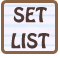
<style>
.page{position:relative;width:60px;height:58px}
.page>*{position:absolute;margin:0}
.t1{font:18px "HoboStd";color:#4e3831}
</style>
<div class="page">
<p class="t1" style="left:13px;top:7px;width:34px;height:16px">SET</p>
<p class="t1" style="left:11px;top:33px;width:39px;height:16px">LIST</p>
</div>
